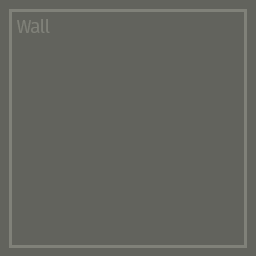
<style>
.page{position:relative;width:256px;height:256px;background:#62635d}
.page>*{position:absolute;margin:0}
.t1{font:18px "FiraSans-Regular";letter-spacing:-0.02em;color:#808179}
</style>
<div class="page">
<p class="t1" style="left:17px;top:19px;width:33px;height:14px">Wall</p>
</div>
